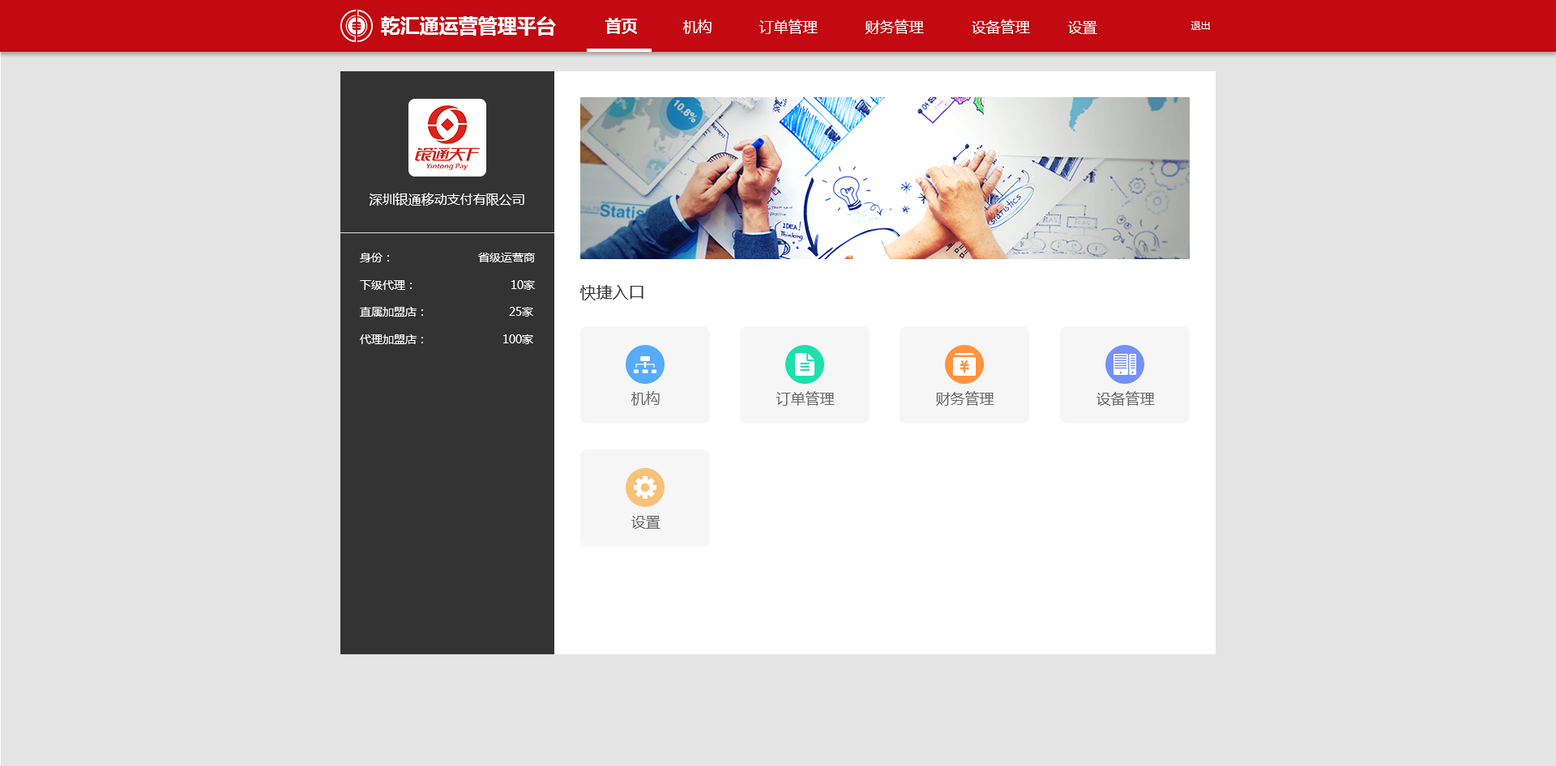
<style>
.page{position:relative;width:1556px;height:766px;background:#e4e4e4}
.page>*{position:absolute;margin:0}
.t1{font:19.4px "MicrosoftYaHei-Bold";color:#ffffff}
.t2{font:16.2px "MicrosoftYaHei-Bold";color:#ffffff}
.t3{font:14.6px "MicrosoftYaHei";color:#ffffff}
.t4{font:9.7px "MicrosoftYaHei";color:#ffffff}
.t5{font:13px "MicrosoftYaHei";color:#ffffff}
.t6{font:11.3px "MicrosoftYaHei";color:#ffffff}
.t7{font:16.2px "MicrosoftYaHei";color:#333333}
.t8{font:14.6px "MicrosoftYaHei";color:#666666}
</style>
<div class="page">
<p class="t1" style="left:381px;top:16px;width:175px;height:20px">乾汇通运营管理平台</p>
<p class="t2" style="left:605px;top:18px;width:33px;height:16px">首页</p>
<p class="t3" style="left:683px;top:19px;width:28px;height:15px">机构</p>
<p class="t3" style="left:758px;top:19px;width:60px;height:15px">订单管理</p>
<p class="t3" style="left:865px;top:19px;width:59px;height:15px">财务管理</p>
<p class="t3" style="left:971px;top:19px;width:59px;height:15px">设备管理</p>
<p class="t3" style="left:1068px;top:21px;width:29px;height:13px">设置</p>
<p class="t4" style="left:1190px;top:21px;width:20px;height:9px">退出</p>
<p class="t5" style="left:369px;top:193px;width:155px;height:13px">深圳银通移动支付有限公司</p>
<p class="t6" style="left:360px;top:253px;width:175px;height:91px">身份：                          省级运营商<br><br>下级代理：                             10家<br><br>直属加盟店：                         25家<br><br>代理加盟店：                       100家</p>
<p class="t7" style="left:580px;top:285px;width:63px;height:16px">快捷入口</p>
<p class="t8" style="left:631px;top:391px;width:29px;height:15px">机构</p>
<p class="t8" style="left:775px;top:391px;width:60px;height:15px">订单管理</p>
<p class="t8" style="left:936px;top:391px;width:58px;height:15px">财务管理</p>
<p class="t8" style="left:1096px;top:391px;width:59px;height:15px">设备管理</p>
<p class="t8" style="left:631px;top:516px;width:29px;height:13px">设置</p>
</div>
